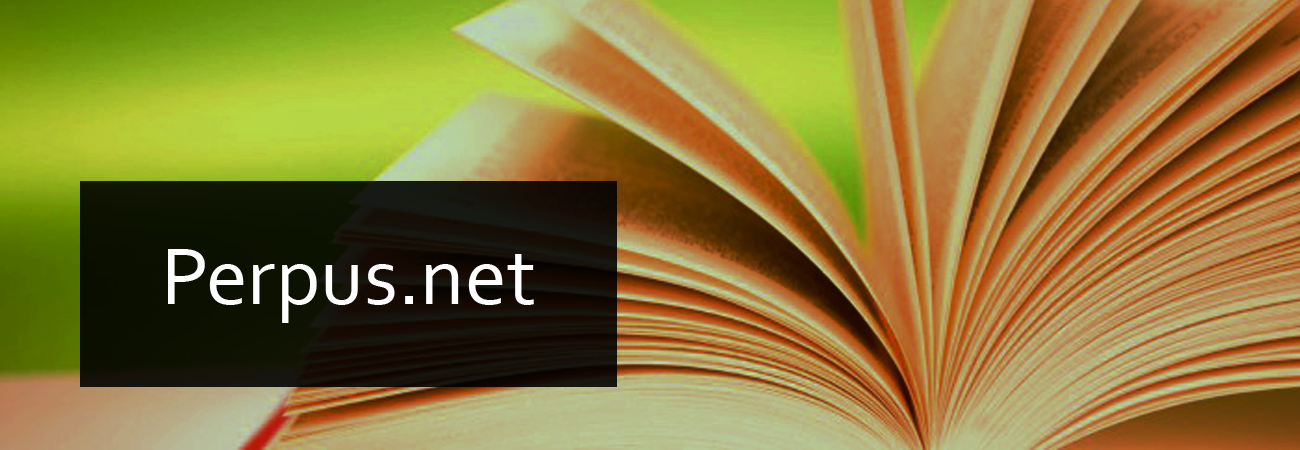
<style>
.page{position:relative;width:1300px;height:450px}
.page>*{position:absolute;margin:0}
.t1{font:84.2px "Corbel";color:#ffffff}
</style>
<div class="page">
<p class="t1" style="left:168px;top:249px;width:366px;height:74px">Perpus.net</p>
</div>
